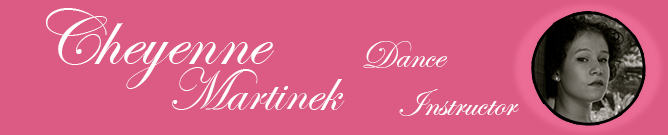
<style>
.page{position:relative;width:668px;height:135px;background:#dc5b84}
.page>*{position:absolute;margin:0}
.t1{font:80px "EdwardianScriptITC";color:#ffffff}
.t2{font:40px "EdwardianScriptITC";color:#ffffff}
.t3{font:60px "EdwardianScriptITC";color:#fffefe}
</style>
<div class="page">
<p class="t1" style="left:46px;top:8px;width:228px;height:81px">Cheyenne</p>
<p class="t2" style="left:363px;top:41px;width:156px;height:75px">Dance<br> Instructor</p>
<p class="t3" style="left:172px;top:67px;width:173px;height:43px">Martinek</p>
</div>
